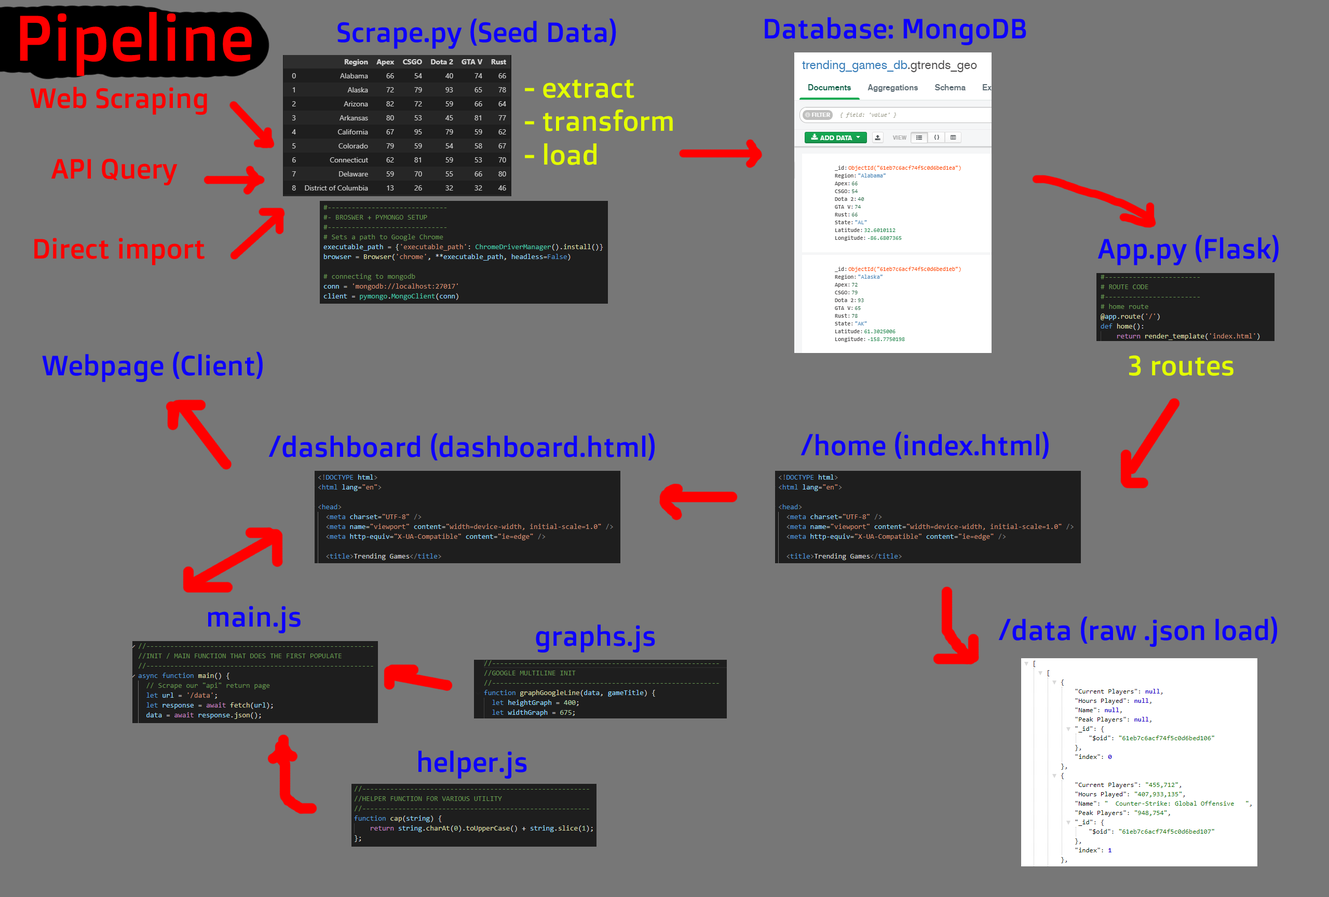
<style>
.page{position:relative;width:1329px;height:897px;background:#777777}
.page>*{position:absolute;margin:0}
.t1{font:64.4px "DoppioOne-Regular";color:#ff0000}
.t2{font:27.9px "DoppioOne-Regular";color:#0d00ff}
.t3{font:27.9px "DoppioOne-Regular";color:#ff0000}
.t4{font:27.9px "DoppioOne-Regular";color:#e3ff00}
</style>
<div class="page">
<p class="t1" style="left:20px;top:12px;width:232px;height:64px">Pipeline</p>
<p class="t2" style="left:765px;top:17px;width:261px;height:29px">Database: MongoDB</p>
<p class="t2" style="left:337px;top:18px;width:279px;height:31px">Scrape.py (Seed Data)</p>
<p class="t3" style="left:30px;top:87px;width:177px;height:28px">Web Scraping</p>
<p class="t4" style="left:525px;top:79px;width:148px;height:86px">- extract<br>- transform<br>- load</p>
<p class="t3" style="left:51px;top:158px;width:127px;height:28px">API Query</p>
<p class="t3" style="left:34px;top:238px;width:171px;height:27px">Direct import</p>
<p class="t2" style="left:1098px;top:235px;width:181px;height:31px">App.py (Flask)</p>
<p class="t2" style="left:42px;top:351px;width:221px;height:32px">Webpage (Client)</p>
<p class="t4" style="left:1129px;top:355px;width:105px;height:21px">3 routes</p>
<p class="t2" style="left:268px;top:433px;width:387px;height:28px">/dashboard (dashboard.html)</p>
<p class="t2" style="left:801px;top:431px;width:248px;height:28px">/home (index.html)</p>
<p class="t2" style="left:208px;top:606px;width:93px;height:28px">main.js</p>
<p class="t2" style="left:998px;top:616px;width:280px;height:31px">/data (raw .json load)</p>
<p class="t2" style="left:536px;top:625px;width:119px;height:28px">graphs.js</p>
<p class="t2" style="left:418px;top:751px;width:109px;height:28px">helper.js</p>
</div>
